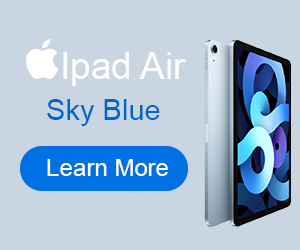
<style>
.page{position:relative;width:300px;height:250px;background:#c9d6e2}
.page>*{position:absolute;margin:0}
.t1{font:37.1px "ArialMT";color:#ffffff}
.t2{font:29.2px "ArialMT";color:#0066cc}
.t3{font:24px "ArialMT";color:#ffffff}
</style>
<div class="page">
<p class="t1" style="left:63px;top:52px;width:123px;height:34px">Ipad Air</p>
<p class="t2" style="left:47px;top:99px;width:113px;height:27px">Sky Blue</p>
<p class="t3" style="left:47px;top:159px;width:121px;height:17px">Learn More</p>
</div>
